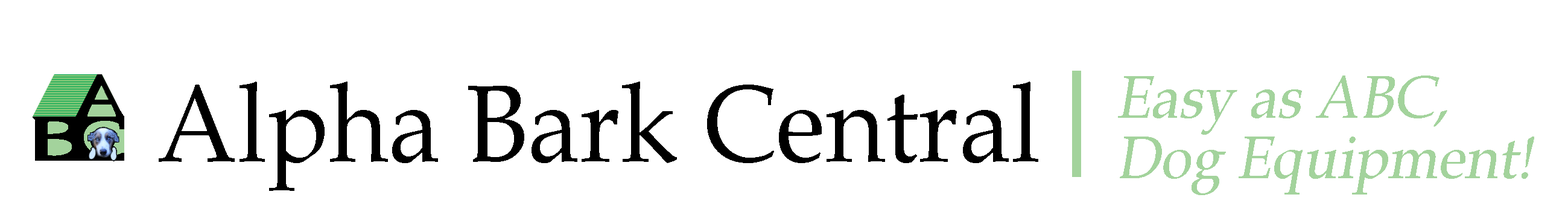
<style>
.page{position:relative;width:1568px;height:206px;background:#ffffff}
.page>*{position:absolute;margin:0}
.t1{font:60.3px/60.3px "BookAntiqua";color:#a3d39c;font-style:italic;scale:0.94 1}
.t2{font:109.3px "BookAntiqua";color:#000000;scale:0.94 1}
</style>
<div class="page">
<p class="t1" style="left:1118px;top:75px;width:416px;height:120px">Easy as ABC,<br>Dog Equipment!</p>
<p class="t2" style="left:159px;top:81px;width:879px;height:110px">Alpha Bark Central</p>
</div>
